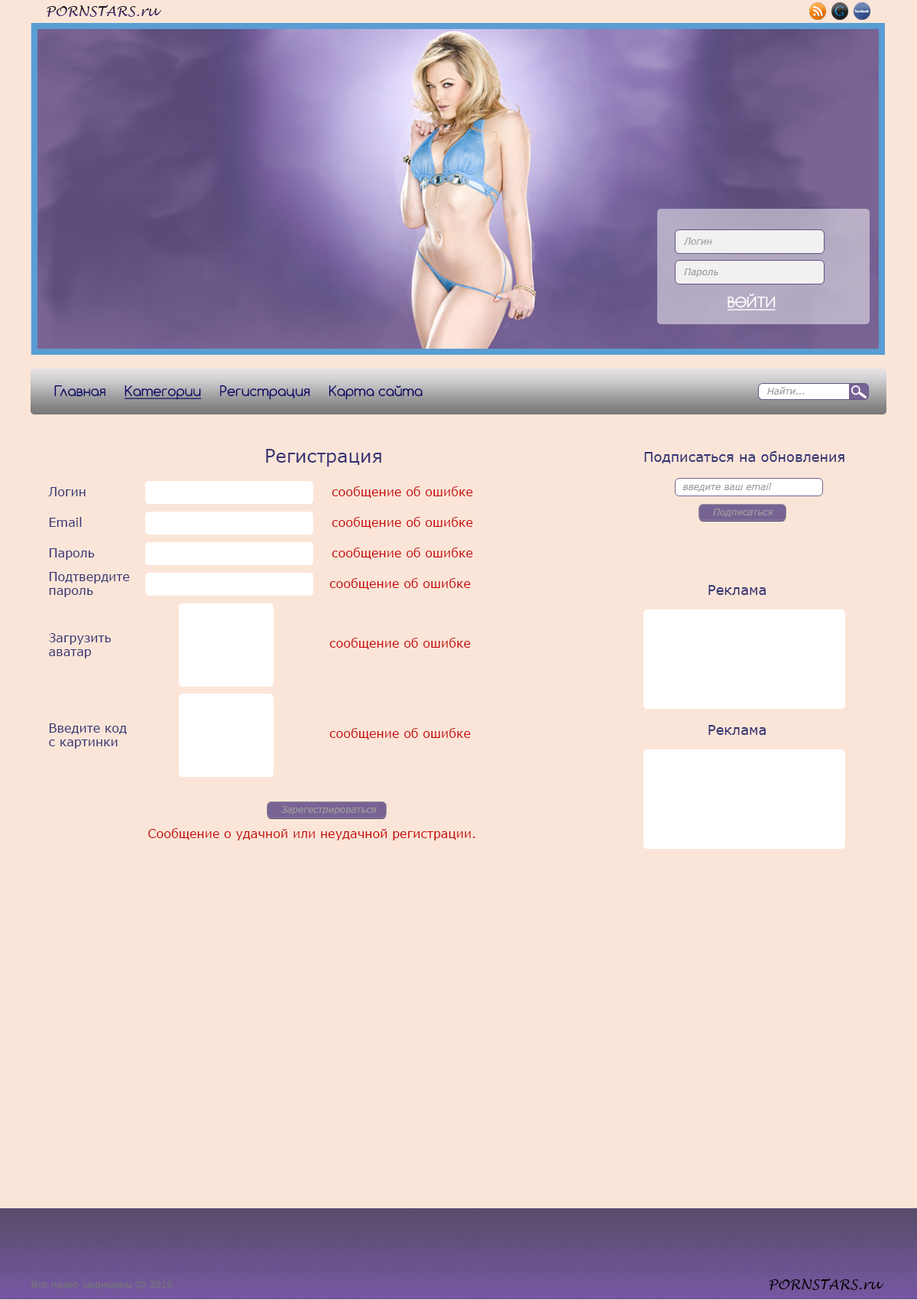
<style>
.page{position:relative;width:917px;height:1300px;background:#fbe5d8}
.page>*{position:absolute;margin:0}
.t1{font:13.8px "LucidaHandwriting-Italic";text-transform:uppercase}
.t2{font:13.8px "LucidaHandwriting-Italic"}
.t3{font:9.2px "Verdana-Italic";color:#9d9d9d}
.t4{font:13.8px "Comfortaa-Regular";color:#ffffff;text-transform:uppercase;text-decoration:underline}
.t5{font:13.8px "Comfortaa-Regular";color:#020064}
.t6{font:13.8px "Comfortaa-Regular";color:#020064;text-decoration:underline}
.t7{font:18.3px "Verdana";color:#363475}
.t8{font:13.8px "Verdana";color:#363475}
.t9{font:12.2px "Verdana";color:#363475}
.t10{font:12.2px "Verdana";color:#c60404}
.t11{font:12.2px/13.8px "Verdana";color:#363475}
.t12{font:13.8px "LucidaHandwriting-Italic";color:#000000;text-transform:uppercase}
.t13{font:13.8px "LucidaHandwriting-Italic";color:#000000}
.t14{font:9.2px "Verdana";color:#767678}
</style>
<div class="page">
<p class="t1" style="left:47px;top:5px;width:114px;height:12px">pornstars.<span class="t2">ru</span></p>
<p class="t3" style="left:684px;top:238px;width:29px;height:7px">Логин</p>
<p class="t3" style="left:684px;top:268px;width:35px;height:9px">Пароль</p>
<p class="t4" style="left:728px;top:293px;width:48px;height:17px">Войти</p>
<p class="t5" style="left:54px;top:385px;width:369px;height:15px">Главная     <span class="t6">Категории</span>     Регистрация     Карта сайта</p>
<p class="t3" style="left:768px;top:387px;width:37px;height:8px">Найти...</p>
<p class="t7" style="left:266px;top:449px;width:116px;height:17px">Регистрация</p>
<p class="t8" style="left:645px;top:451px;width:200px;height:12px">Подписаться на обновления</p>
<p class="t3" style="left:683px;top:482px;width:89px;height:10px">введите ваш email</p>
<p class="t9" style="left:48px;top:487px;width:38px;height:9px">Логин</p>
<p class="t10" style="left:332px;top:486px;width:141px;height:12px">сообщение об ошибке</p>
<p class="t3" style="left:713px;top:508px;width:61px;height:9px">Подписаться</p>
<p class="t9" style="left:49px;top:517px;width:33px;height:10px">Email</p>
<p class="t10" style="left:332px;top:517px;width:141px;height:11px">сообщение об ошибке</p>
<p class="t9" style="left:49px;top:548px;width:46px;height:12px">Пароль</p>
<p class="t10" style="left:332px;top:547px;width:141px;height:12px">сообщение об ошибке</p>
<p class="t11" style="left:49px;top:572px;width:81px;height:25px">Подтвердите<br>пароль</p>
<p class="t10" style="left:330px;top:578px;width:141px;height:11px">сообщение об ошибке</p>
<p class="t8" style="left:709px;top:585px;width:57px;height:10px">Реклама</p>
<p class="t11" style="left:49px;top:633px;width:62px;height:25px">Загрузить<br>аватар</p>
<p class="t10" style="left:330px;top:638px;width:141px;height:11px">сообщение об ошибке</p>
<p class="t11" style="left:49px;top:723px;width:78px;height:25px">Введите код<br>с картинки</p>
<p class="t8" style="left:709px;top:725px;width:57px;height:10px">Реклама</p>
<p class="t10" style="left:330px;top:728px;width:141px;height:11px">сообщение об ошибке</p>
<p class="t3" style="left:281px;top:806px;width:96px;height:8px">Зарегестрироваться</p>
<p class="t10" style="left:148px;top:828px;width:328px;height:12px">Сообщение о удачной или неудачной регистрации.</p>
<p class="t12" style="left:769px;top:1278px;width:116px;height:12px">pornstars.<span class="t13">ru</span></p>
<p class="t14" style="left:31px;top:1281px;width:142px;height:8px">Все право защищены     2016</p>
</div>
